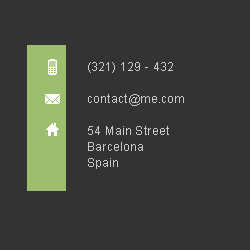
<style>
.page{position:relative;width:250px;height:250px;background:#333333}
.page>*{position:absolute;margin:0}
.t1{font:12px/16px "ArialMT";letter-spacing:0.025em;color:#c9c9c9}
</style>
<div class="page">
<p class="t1" style="left:88px;top:62px;width:96px;height:107px">(321) 129 - 432<br><br>contact@me.com<br><br>54 Main Street<br>Barcelona<br>Spain</p>
</div>
